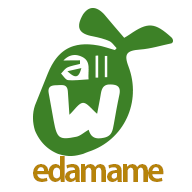
<style>
.page{position:relative;width:192px;height:192px;background:#ffffff}
.page>*{position:absolute;margin:0}
.t1{font:32.2px "KozGoPr6N-Bold";letter-spacing:-0.08em;color:#b6830a}
</style>
<div class="page">
<p class="t1" style="left:33px;top:156px;width:131px;height:26px">edamame</p>
</div>
